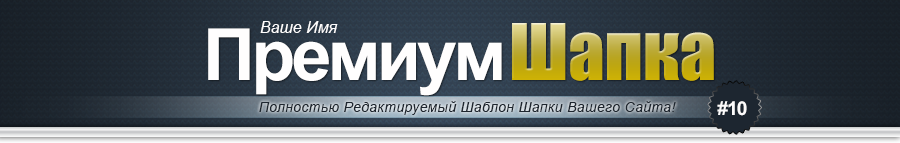
<style>
.page{position:relative;width:900px;height:143px}
.page>*{position:absolute;margin:0}
.t1{font:72px "Arial-BoldMT";letter-spacing:-0.05em;color:#fffefe}
.t2{font:16px "Arial-ItalicMT";color:#fffefe}
.t3{font:72px "Impact"}
.t4{font:14px "Arial-ItalicMT";letter-spacing:0.025em;color:#1e262f}
.t5{font:19.4px "Arial-BoldMT";letter-spacing:-0.05em;color:#fdfcfc}
</style>
<div class="page">
<p class="t1" style="left:208px;top:28px;width:294px;height:68px">Премиум</p>
<p class="t2" style="left:260px;top:21px;width:78px;height:12px">Ваше Имя</p>
<p class="t3" style="left:512px;top:23px;width:202px;height:58px">Шапка</p>
<p class="t4" style="left:259px;top:101px;width:417px;height:14px">Полностью Редактируемый Шаблон Шапки Вашего Сайта!</p>
<p class="t5" style="left:717px;top:101px;width:30px;height:15px">#10</p>
</div>
